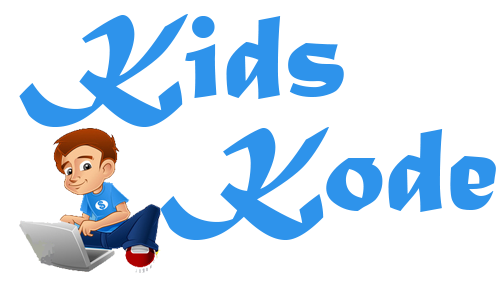
<style>
.page{position:relative;width:504px;height:289px;background:#ffffff}
.page>*{position:absolute;margin:0}
.t1{font:125px "MaturaMTScriptCapitals";color:#2e93eb}
</style>
<div class="page">
<p class="t1" style="left:19px;top:14px;width:325px;height:113px">Kids</p>
<p class="t1" style="left:160px;top:127px;width:336px;height:113px">Kode</p>
</div>
